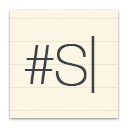
<style>
.page{position:relative;width:128px;height:128px;background:#fcf5e4}
.page>*{position:absolute;margin:0}
.t1{font:55.7px "HelveticaNeue-UltraLight";color:#3c4346;font-weight:bold}
.t2{font:55.2px "HelveticaNeue-UltraLight";color:#3c4346;font-weight:bold}
</style>
<div class="page">
<p class="t1" style="left:91px;top:36px;width:4px;height:57px">|</p>
<p class="t1" style="left:25px;top:45px;width:29px;height:39px">#</p>
<p class="t2" style="left:55px;top:44px;width:32px;height:42px">S</p>
</div>
